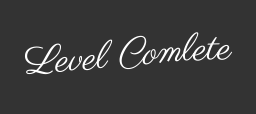
<style>
.page{position:relative;width:256px;height:114px;background:#333333}
.page>*{position:absolute;margin:0}
.t1{font:38.6px "Parisienne-Regular";color:#ffffff}
</style>
<div class="page">
<p class="t1" style="left:24px;top:32px;width:209px;height:43px">Level Comlete</p>
</div>
